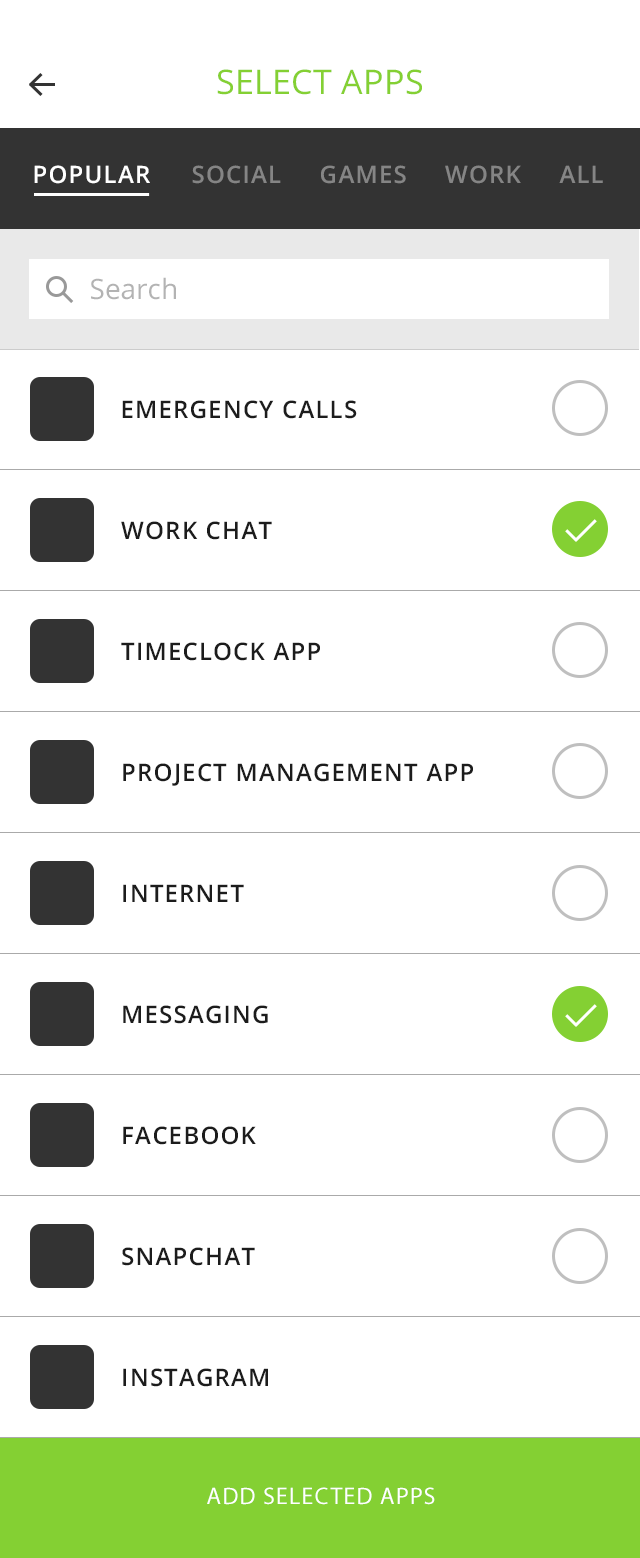
<style>
.page{position:relative;width:640px;height:1558px;background:#ffffff}
.page>*{position:absolute;margin:0}
.t1{font:34px "OpenSans";letter-spacing:0.01em;color:#84d033;text-transform:uppercase}
.t2{font:24px "OpenSans-Semibold";letter-spacing:0.05em;color:#ffffff;text-transform:uppercase}
.t3{font:24px "OpenSans-Semibold";letter-spacing:0.05em;color:#858585;text-transform:uppercase}
.t4{font:28px "OpenSans";color:#b3b3b3}
.t5{font:24px "OpenSans-Semibold";letter-spacing:0.05em;color:#1c1c1c;text-transform:uppercase}
.t6{font:24px "MyriadPro-Regular";letter-spacing:0.05em;color:#ffffff;text-transform:uppercase}
</style>
<div class="page">
<p class="t1" style="left:217px;top:69px;width:205px;height:26px">SELECT APPS</p>
<p class="t2" style="left:34px;top:165px;width:116px;height:19px">pOPULAR</p>
<p class="t3" style="left:192px;top:165px;width:411px;height:19px">SOCIAL     GAMEs     WORK     ALL</p>
<p class="t4" style="left:91px;top:277px;width:85px;height:23px">Search</p>
<p class="t5" style="left:122px;top:400px;width:235px;height:19px">EMERGENCY CALLS</p>
<p class="t5" style="left:121px;top:521px;width:151px;height:19px">WORK CHAT</p>
<p class="t5" style="left:121px;top:642px;width:199px;height:19px">TIMECLOCK APP</p>
<p class="t5" style="left:123px;top:763px;width:350px;height:23px">PROJECT MANAGEMENT APP</p>
<p class="t5" style="left:123px;top:884px;width:121px;height:18px">INTERNET</p>
<p class="t5" style="left:123px;top:1005px;width:145px;height:19px">MESSAGING</p>
<p class="t5" style="left:123px;top:1126px;width:133px;height:19px">FACEBOOK</p>
<p class="t5" style="left:122px;top:1247px;width:133px;height:19px">SNAPCHAT</p>
<p class="t5" style="left:123px;top:1368px;width:145px;height:19px">INSTAGRAM</p>
<p class="t6" style="left:207px;top:1487px;width:228px;height:18px">ADD SELECTED APPS</p>
</div>
